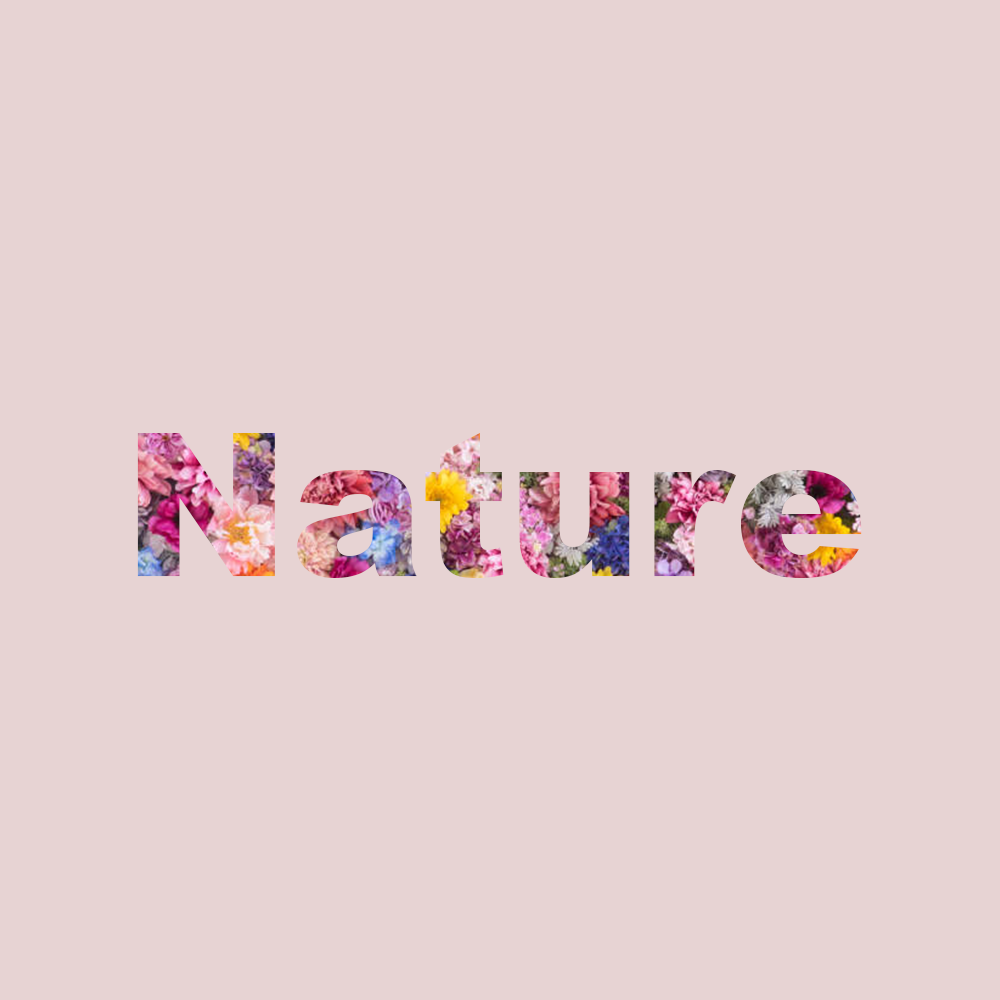
<style>
.page{position:relative;width:1000px;height:1000px;background:#e7d3d3}
.page>*{position:absolute;margin:0}
.t1{font:200px "Arial-Black"}
</style>
<div class="page">
<p class="t1" style="left:137px;top:433px;width:725px;height:145px">Nature</p>
</div>
